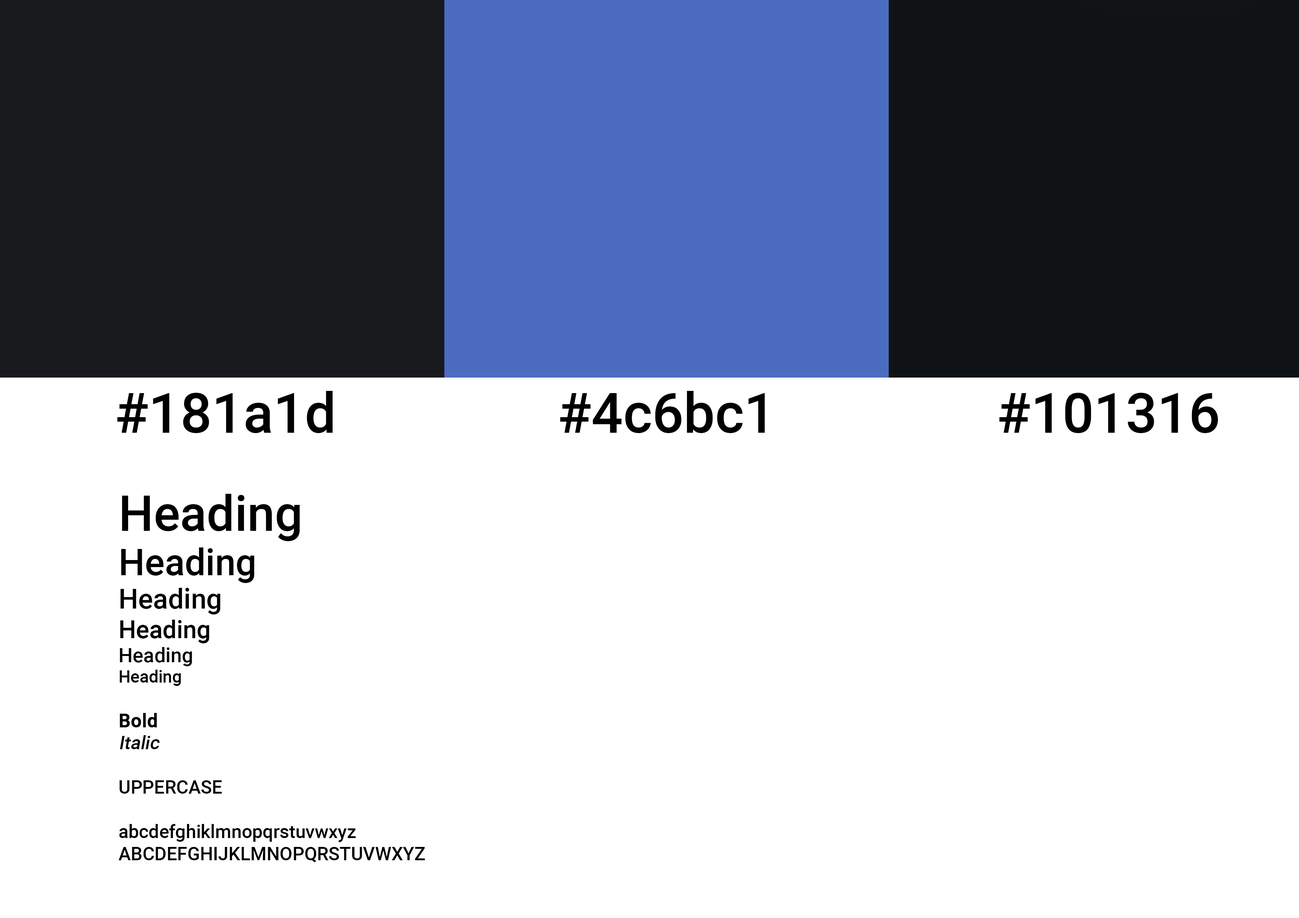
<style>
.page{position:relative;width:1299px;height:918px;background:#ffffff}
.page>*{position:absolute;margin:0}
.t1{font:55.5px "Roboto-Medium";color:#000000}
.t2{font:4.4px "Roboto-Medium";color:#000000}
.t3{font:49.4px "Roboto-Medium";color:#000000}
.t4{font:37px "Roboto-Medium";color:#000000}
.t5{font:27.8px "Roboto-Medium";color:#000000}
.t6{font:24.7px "Roboto-Medium";color:#000000}
.t7{font:20.1px "Roboto-Medium";color:#000000}
.t8{font:17px "Roboto-Medium";color:#000000}
.t9{font:4.4px "Roboto-Medium";color:#000000;font-weight:bold}
.t10{font:4.4px "Roboto-Medium";color:#000000;font-style:italic}
</style>
<div class="page">
<p class="t1" style="left:117px;top:391px;width:1101px;height:42px">#181a1d                #4c6bc1                #101316</p>
<p class="t2" style="left:118px;top:494px;width:307px;height:369px"><span class="t3">Heading <br></span><span class="t4">Heading <br></span><span class="t5">Heading <br></span><span class="t6">Heading <br></span><span class="t7">Heading <br></span><span class="t8">Heading<br><br></span><span class="t9">Bold<br></span><span class="t10">Italic<br></span><br>UPPERCASE<br><br>abcdefghiklmnopqrstuvwxyz<br>ABCDEFGHIJKLMNOPQRSTUVWXYZ<br><br>1234567890</p>
</div>
